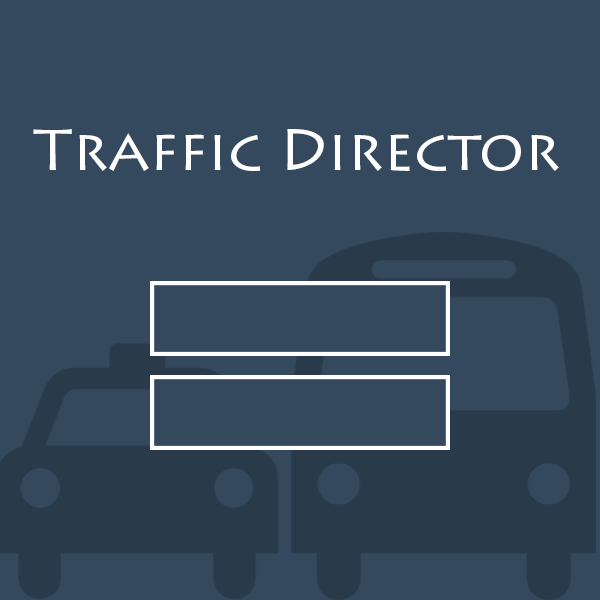
<style>
.page{position:relative;width:600px;height:600px;background:#34495e}
.page>*{position:absolute;margin:0}
.t1{font:58.3px "LithosPro-Regular";color:#ffffff}
</style>
<div class="page">
<p class="t1" style="left:33px;top:129px;width:526px;height:42px">Traffic Director</p>
</div>
